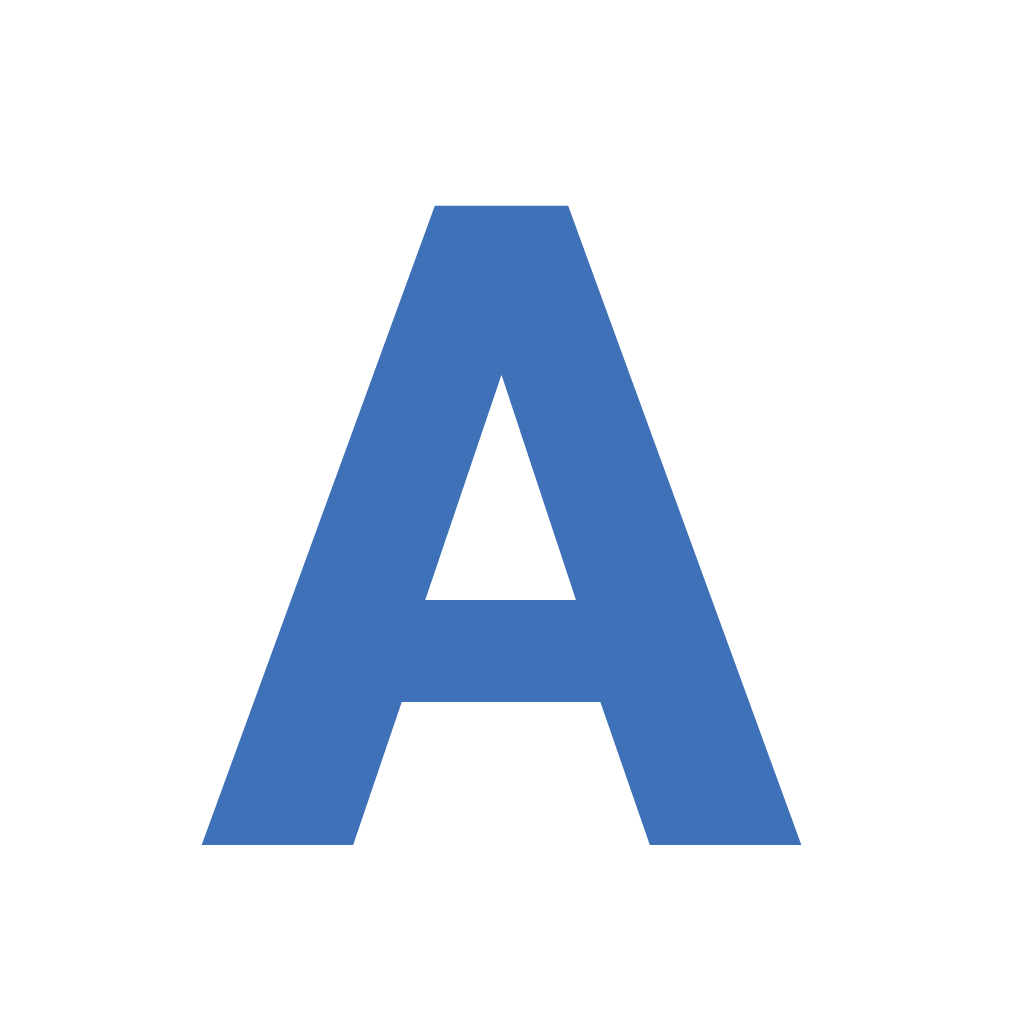
<style>
.page{position:relative;width:1024px;height:1024px;background:#ffffff}
.page>*{position:absolute;margin:0}
.t1{font:900px "Raleway-ExtraBold";color:#3f71b8}
</style>
<div class="page">
<p class="t1" style="left:201px;top:205px;width:601px;height:640px">A</p>
</div>
